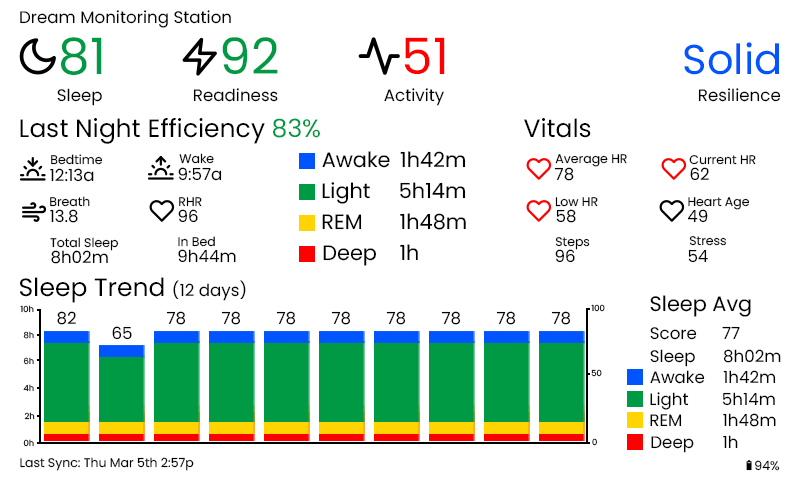
<style>
.page{position:relative;width:800px;height:480px;background:#ffffff}
.page>*{position:absolute;margin:0}
.t1{font:16.7px "Poppins-Regular";color:#000000}
.t2{font:50px "Poppins-Regular";color:#009944}
.t3{font:50px "Poppins-Regular";color:#ff0000}
.t4{font:41.7px "Poppins-Regular";color:#0055ff}
.t5{font:25px "Poppins-Regular";color:#000000}
.t6{font:25px "Poppins-Regular";color:#009944}
.t7{font:12.5px "Poppins-Regular";color:#000000}
.t8{font:20.8px "Poppins-Regular";color:#000000}
.t9{font:8.3px "Poppins-Regular"}
</style>
<div class="page">
<p class="t1" style="left:20px;top:10px;width:211px;height:18px">Dream Monitoring Station</p>
<p class="t2" style="left:61px;top:37px;width:41px;height:38px">81</p>
<p class="t2" style="left:222px;top:37px;width:56px;height:37px">92</p>
<p class="t3" style="left:404px;top:37px;width:41px;height:37px">51</p>
<p class="t4" style="left:684px;top:42px;width:95px;height:33px">Solid</p>
<p class="t1" style="left:57px;top:88px;width:45px;height:18px">Sleep</p>
<p class="t1" style="left:193px;top:88px;width:85px;height:14px">Readiness</p>
<p class="t1" style="left:384px;top:88px;width:60px;height:18px">Activity</p>
<p class="t1" style="left:698px;top:88px;width:83px;height:14px">Resilience</p>
<p class="t5" style="left:20px;top:118px;width:300px;height:26px">Last Night Efficiency <span class="t6">83%</span></p>
<p class="t5" style="left:524px;top:118px;width:67px;height:20px">Vitals</p>
<p class="t7" style="left:51px;top:154px;width:52px;height:11px">Bedtime</p>
<p class="t7" style="left:179px;top:153px;width:35px;height:11px">Wake</p>
<p class="t8" style="left:322px;top:151px;width:68px;height:17px">Awake</p>
<p class="t8" style="left:400px;top:151px;width:66px;height:17px">1h42m</p>
<p class="t7" style="left:555px;top:154px;width:72px;height:13px">Average HR</p>
<p class="t7" style="left:689px;top:155px;width:67px;height:10px">Current HR</p>
<p class="t1" style="left:50px;top:168px;width:44px;height:14px">12:13a</p>
<p class="t1" style="left:178px;top:167px;width:44px;height:14px">9:57a</p>
<p class="t1" style="left:554px;top:167px;width:20px;height:14px">78</p>
<p class="t1" style="left:690px;top:167px;width:19px;height:14px">62</p>
<p class="t8" style="left:322px;top:182px;width:48px;height:22px">Light</p>
<p class="t8" style="left:400px;top:182px;width:66px;height:17px">5h14m</p>
<p class="t7" style="left:50px;top:196px;width:40px;height:11px">Breath</p>
<p class="t7" style="left:179px;top:197px;width:23px;height:10px">RHR</p>
<p class="t7" style="left:555px;top:197px;width:43px;height:10px">Low HR</p>
<p class="t7" style="left:688px;top:197px;width:62px;height:13px">Heart Age</p>
<p class="t1" style="left:50px;top:209px;width:28px;height:14px">13.8</p>
<p class="t1" style="left:178px;top:209px;width:20px;height:14px">96</p>
<p class="t1" style="left:556px;top:209px;width:20px;height:14px">58</p>
<p class="t1" style="left:687px;top:209px;width:21px;height:14px">49</p>
<p class="t8" style="left:322px;top:214px;width:40px;height:16px">REM</p>
<p class="t8" style="left:400px;top:213px;width:66px;height:17px">1h48m</p>
<p class="t7" style="left:50px;top:237px;width:69px;height:14px">Total Sleep</p>
<p class="t7" style="left:178px;top:236px;width:37px;height:11px">In Bed</p>
<p class="t8" style="left:323px;top:245px;width:54px;height:21px">Deep</p>
<p class="t8" style="left:400px;top:244px;width:18px;height:17px">1h</p>
<p class="t7" style="left:555px;top:237px;width:35px;height:13px">Steps</p>
<p class="t7" style="left:689px;top:236px;width:37px;height:10px">Stress</p>
<p class="t1" style="left:51px;top:250px;width:57px;height:14px">8h02m</p>
<p class="t1" style="left:178px;top:249px;width:58px;height:14px">9h44m</p>
<p class="t1" style="left:555px;top:249px;width:20px;height:14px">96</p>
<p class="t1" style="left:688px;top:249px;width:20px;height:14px">54</p>
<p class="t5" style="left:20px;top:277px;width:226px;height:26px">Sleep Trend <span class="t1">(12 days)</span></p>
<p class="t9" style="left:20px;top:305px;width:14px;height:8px">10h</p>
<p class="t9" style="left:591px;top:304px;width:14px;height:8px">100</p>
<p class="t8" style="left:650px;top:295px;width:101px;height:22px">Sleep Avg</p>
<p class="t1" style="left:57px;top:311px;width:19px;height:14px">82</p>
<p class="t1" style="left:166px;top:311px;width:20px;height:14px">78</p>
<p class="t1" style="left:221px;top:311px;width:20px;height:14px">78</p>
<p class="t1" style="left:276px;top:311px;width:20px;height:14px">78</p>
<p class="t1" style="left:331px;top:311px;width:20px;height:14px">78</p>
<p class="t1" style="left:386px;top:311px;width:20px;height:14px">78</p>
<p class="t1" style="left:441px;top:311px;width:20px;height:14px">78</p>
<p class="t1" style="left:496px;top:311px;width:20px;height:14px">78</p>
<p class="t1" style="left:551px;top:311px;width:20px;height:14px">78</p>
<p class="t1" style="left:112px;top:326px;width:20px;height:14px">65</p>
<p class="t1" style="left:650px;top:327px;width:47px;height:13px">Score</p>
<p class="t1" style="left:722px;top:326px;width:18px;height:13px">77</p>
<p class="t9" style="left:23px;top:331px;width:11px;height:8px">8h</p>
<p class="t1" style="left:650px;top:349px;width:45px;height:18px">Sleep</p>
<p class="t1" style="left:723px;top:349px;width:58px;height:14px">8h02m</p>
<p class="t9" style="left:23px;top:357px;width:11px;height:8px">6h</p>
<p class="t9" style="left:591px;top:369px;width:11px;height:8px">50</p>
<p class="t1" style="left:650px;top:370px;width:55px;height:14px">Awake</p>
<p class="t1" style="left:723px;top:370px;width:53px;height:14px">1h42m</p>
<p class="t9" style="left:23px;top:384px;width:11px;height:8px">4h</p>
<p class="t1" style="left:650px;top:392px;width:39px;height:18px">Light</p>
<p class="t1" style="left:723px;top:392px;width:52px;height:14px">5h14m</p>
<p class="t9" style="left:24px;top:412px;width:11px;height:8px">2h</p>
<p class="t1" style="left:650px;top:414px;width:32px;height:13px">REM</p>
<p class="t1" style="left:723px;top:413px;width:53px;height:14px">1h48m</p>
<p class="t9" style="left:592px;top:438px;width:5px;height:8px">0</p>
<p class="t1" style="left:651px;top:436px;width:43px;height:17px">Deep</p>
<p class="t1" style="left:723px;top:435px;width:15px;height:14px">1h</p>
<p class="t9" style="left:23px;top:439px;width:11px;height:8px">0h</p>
<p class="t7" style="left:20px;top:457px;width:174px;height:14px">Last Sync: Thu Mar 5th 2:57p</p>
<p class="t7" style="left:755px;top:460px;width:25px;height:11px">94%</p>
</div>
